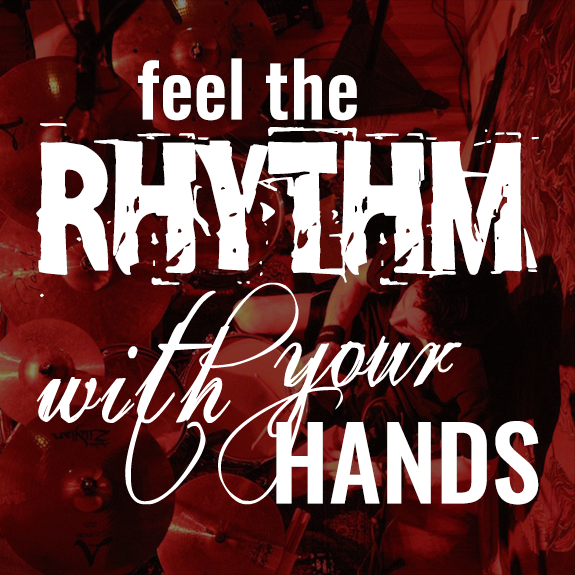
<style>
.page{position:relative;width:575px;height:575px;background:#ffffff}
.page>*{position:absolute;margin:0}
.t1{font:75.4px "Oswald-Medium";color:#ffffff}
.t2{font:150px "Zero&Zero-Is";color:#ffffff}
.t3{font:100.5px "Oswald-Medium";color:#ffffff}
</style>
<div class="page">
<p class="t1" style="left:138px;top:58px;width:219px;height:63px">feel the</p>
<p class="t2" style="left:36px;top:123px;width:503px;height:174px">RHYTHM</p>
<p class="t3" style="left:276px;top:421px;width:263px;height:84px">HANDS</p>
</div>
